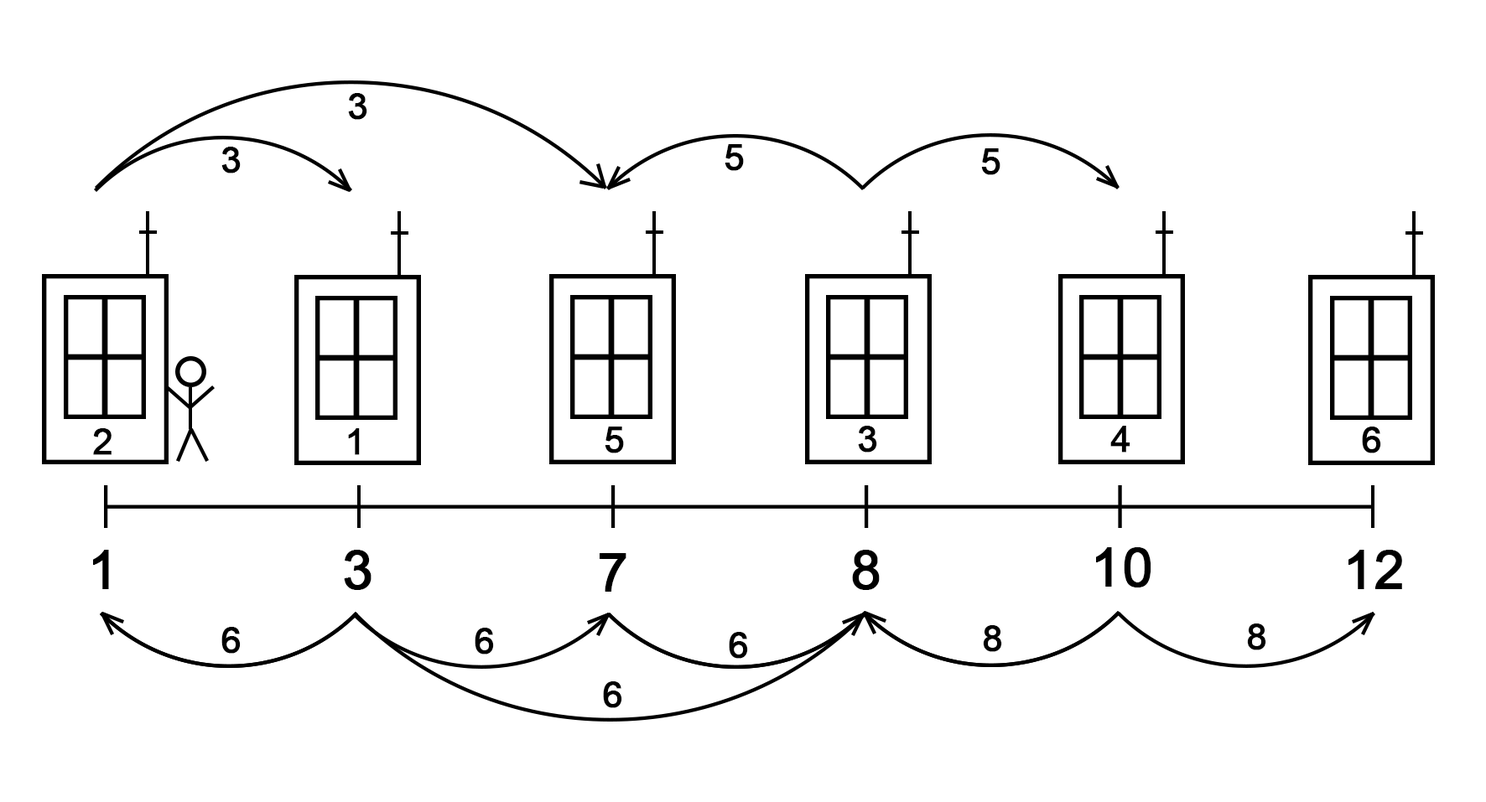
<style>
.page{position:relative;width:1486px;height:802px;background:#ffffff}
.page>*{position:absolute;margin:0}
.t1{font:35.8px "ArialMT";color:#000000;font-weight:bold}
.t2{font:53.6px "ArialMT";color:#000000;font-weight:bold}
</style>
<div class="page">
<p class="t1" style="left:348px;top:93px;width:19px;height:27px">3</p>
<p class="t1" style="left:221px;top:147px;width:20px;height:27px">3</p>
<p class="t1" style="left:725px;top:144px;width:19px;height:27px">5</p>
<p class="t1" style="left:981px;top:148px;width:19px;height:27px">5</p>
<p class="t1" style="left:858px;top:426px;width:19px;height:27px">3</p>
<p class="t1" style="left:1110px;top:426px;width:20px;height:27px">4</p>
<p class="t1" style="left:93px;top:428px;width:19px;height:27px">2</p>
<p class="t1" style="left:348px;top:428px;width:12px;height:27px">1</p>
<p class="t1" style="left:605px;top:427px;width:19px;height:27px">5</p>
<p class="t1" style="left:1362px;top:427px;width:19px;height:27px">6</p>
<p class="t2" style="left:93px;top:550px;width:16px;height:40px">1</p>
<p class="t2" style="left:344px;top:550px;width:27px;height:40px">3</p>
<p class="t2" style="left:600px;top:553px;width:26px;height:39px">7</p>
<p class="t2" style="left:852px;top:550px;width:28px;height:40px">8</p>
<p class="t2" style="left:1096px;top:548px;width:55px;height:40px">10</p>
<p class="t2" style="left:1348px;top:550px;width:54px;height:40px">12</p>
<p class="t1" style="left:221px;top:627px;width:20px;height:27px">6</p>
<p class="t1" style="left:475px;top:628px;width:19px;height:27px">6</p>
<p class="t1" style="left:983px;top:626px;width:19px;height:26px">8</p>
<p class="t1" style="left:1247px;top:624px;width:19px;height:27px">8</p>
<p class="t1" style="left:729px;top:632px;width:19px;height:27px">6</p>
<p class="t1" style="left:603px;top:682px;width:19px;height:27px">6</p>
</div>
